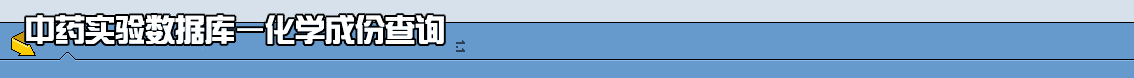
<style>
.page{position:relative;width:1134px;height:78px;background:#6699cc}
.page>*{position:absolute;margin:0}
.t1{font:30px "SingyiEG-Ultra-GB";color:#ffffff}
</style>
<div class="page">
<p class="t1" style="left:26px;top:15px;width:418px;height:29px">中药实验数据库—化学成份查询</p>
</div>
